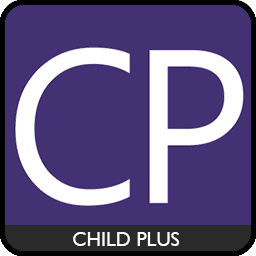
<style>
.page{position:relative;width:256px;height:256px;background:#443174}
.page>*{position:absolute;margin:0}
.t1{font:20px "GillSansMT";color:#ffffff}
</style>
<div class="page">
<p class="t1" style="left:73px;top:232px;width:107px;height:14px">CHILD PLUS</p>
</div>
